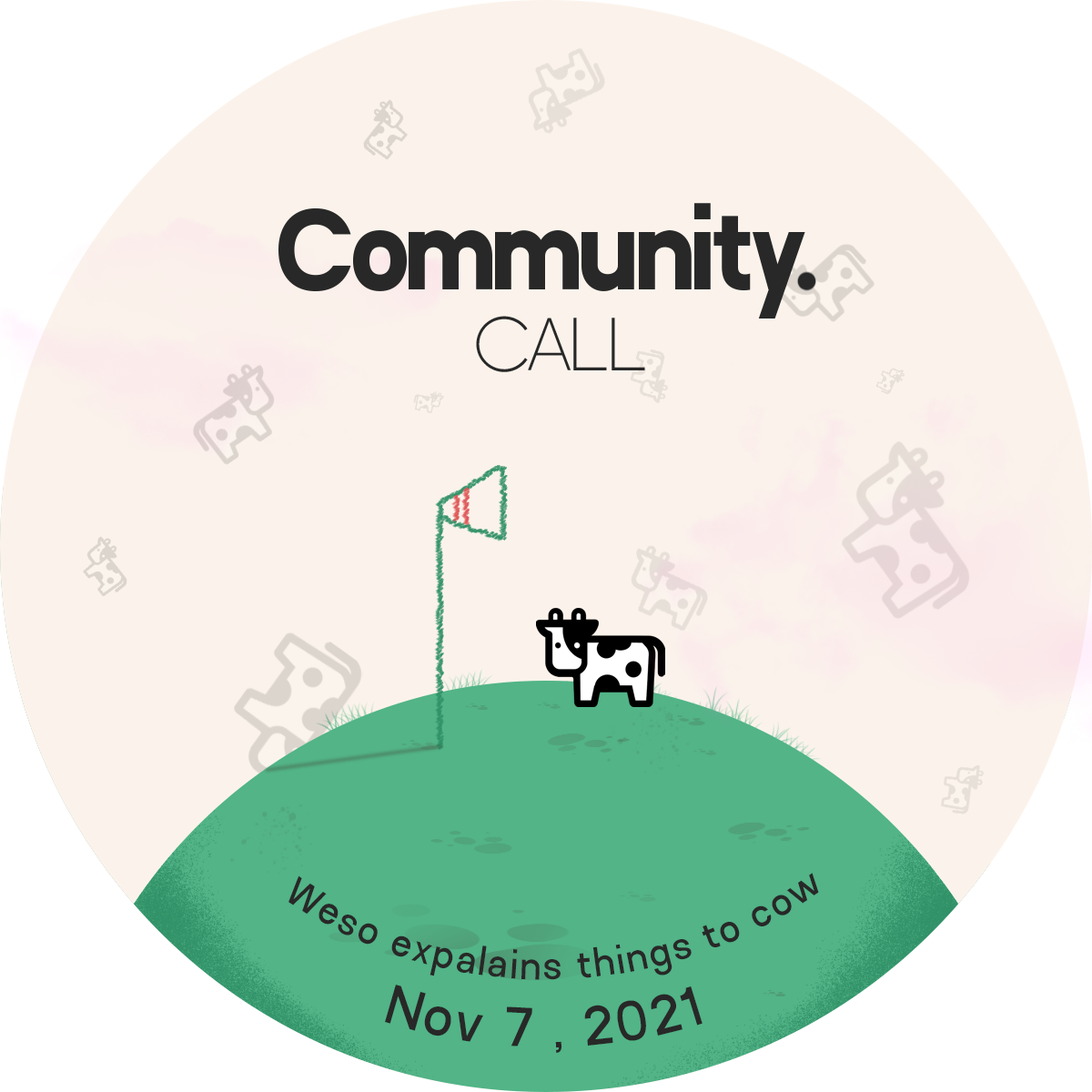
<style>
.page{position:relative;width:1092px;height:1092px;background:#fbf3eb}
.page>*{position:absolute;margin:0}
.t1{font:39px "Bifocals-Regular";letter-spacing:0.06em;color:#282828}
.t2{font:55.5px "Bifocals-Regular";letter-spacing:0.06em;color:#282828}
</style>
<div class="page">
<p class="t1" style="left:288px;top:873px;width:531px;height:107px;rotate:32deg">Weso expalains things to cow</p>
<p class="t2" style="left:385px;top:985px;width:318px;height:68px;rotate:33deg">Nov 7 , 2021</p>
</div>
